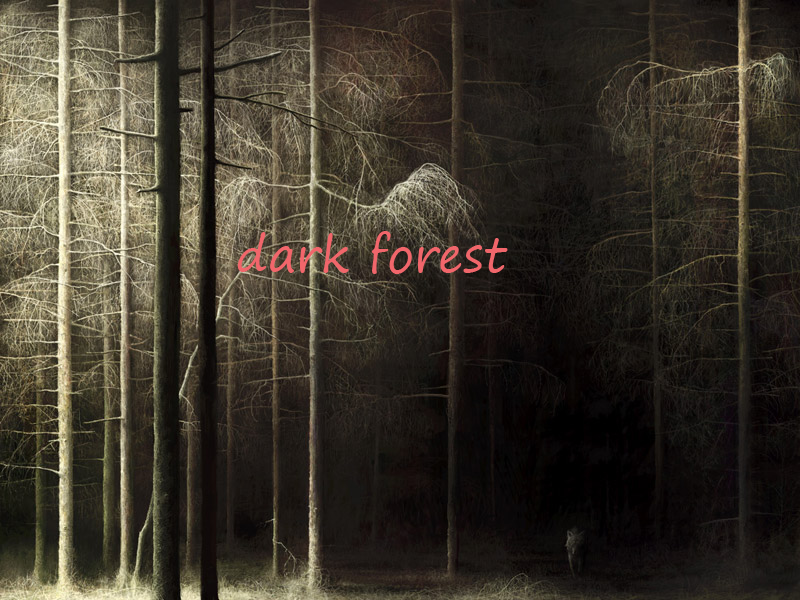
<style>
.page{position:relative;width:800px;height:600px}
.page>*{position:absolute;margin:0}
.t1{font:48px "SegoePrint";color:#f1666b}
</style>
<div class="page">
<p class="t1" style="left:237px;top:231px;width:271px;height:43px">dark forest</p>
</div>
